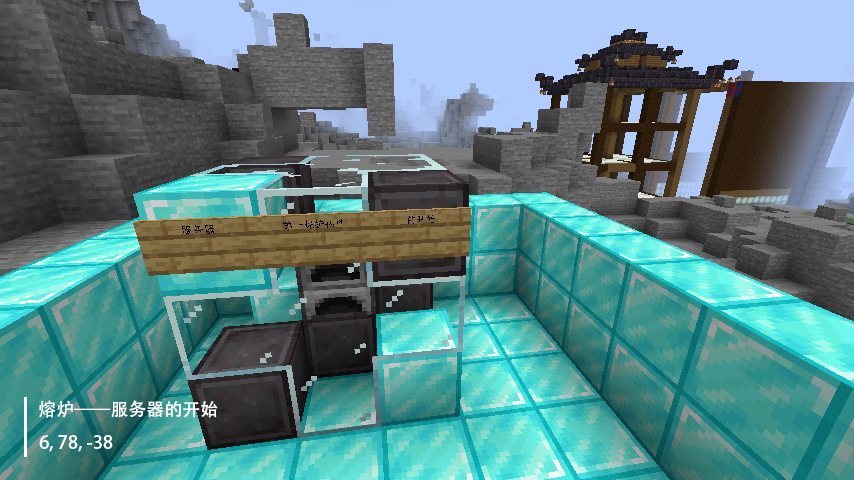
<style>
.page{position:relative;width:854px;height:480px}
.page>*{position:absolute;margin:0}
.t1{font:18px "AdobeHeitiStd-Regular";color:#ffffff}
</style>
<div class="page">
<p class="t1" style="left:39px;top:400px;width:179px;height:18px">熔炉——服务器的开始</p>
<p class="t1" style="left:39px;top:435px;width:74px;height:17px">6, 78, -38</p>
</div>
